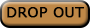
<style>
.page{position:relative;width:90px;height:28px;background:#bf8847}
.page>*{position:absolute;margin:0}
.t1{font:14px "Verdana";color:#000000;font-weight:bold}
</style>
<div class="page">
<p class="t1" style="left:7px;top:7px;width:78px;height:11px">DROP OUT</p>
</div>
